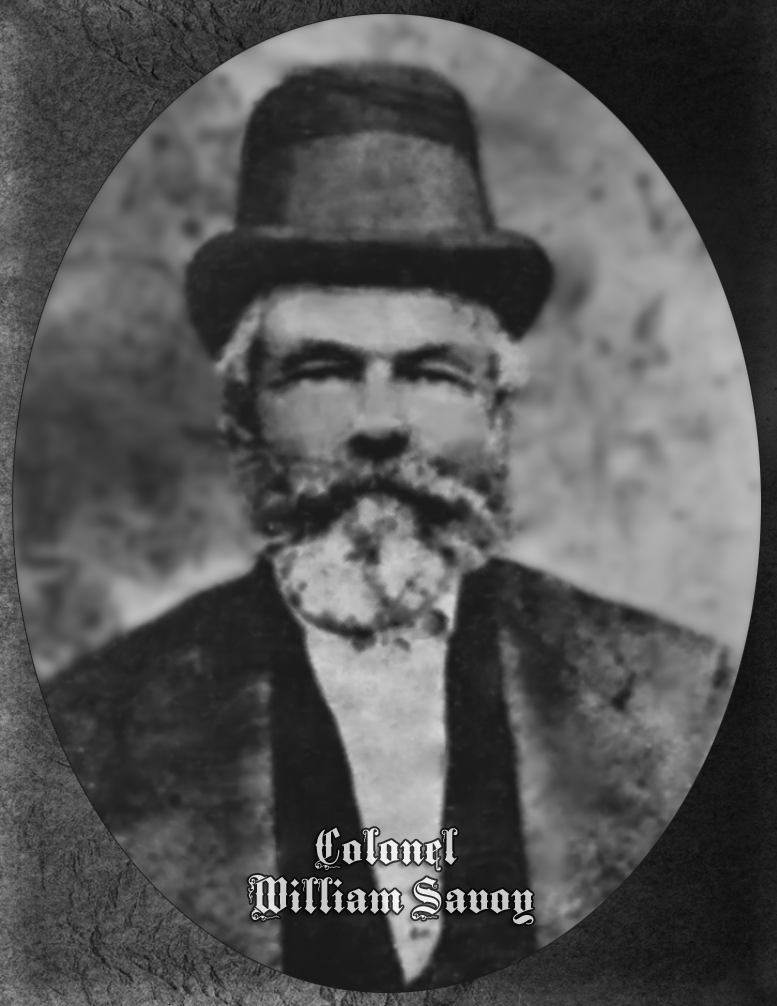
<style>
.page{position:relative;width:777px;height:1006px}
.page>*{position:absolute;margin:0}
.t1{font:53.3px/48.9px "MiddleSaxonyText";color:#cccccc}
</style>
<div class="page">
<p class="t1" style="left:248px;top:827px;width:286px;height:98px;text-align:center">Colonel <br>William Savoy</p>
</div>
